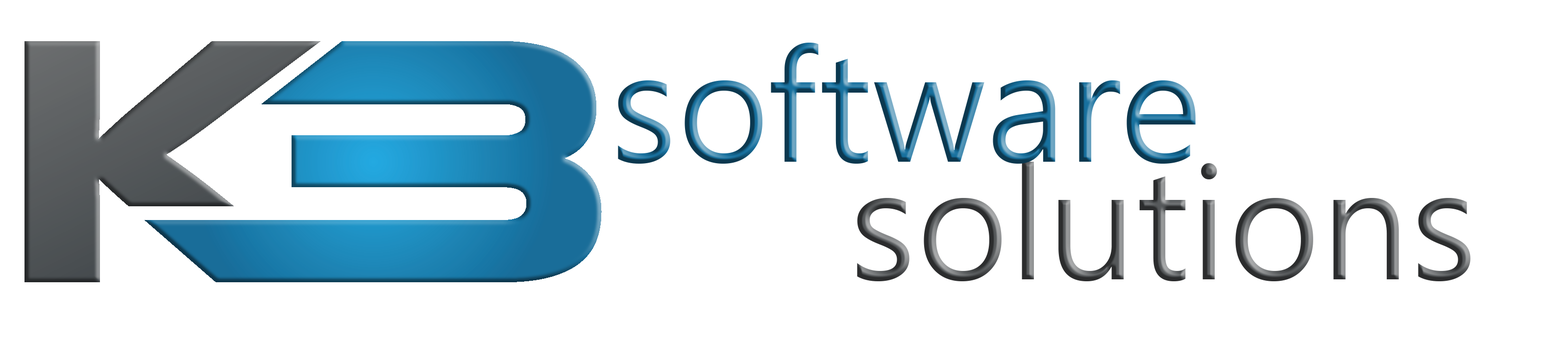
<style>
.page{position:relative;width:1568px;height:343px;background:#ffffff}
.page>*{position:absolute;margin:0}
.t1{font:147px "MicrosoftJhengHeiUIRegular"}
</style>
<div class="page">
<p class="t1" style="left:618px;top:43px;width:578px;height:121px">software</p>
<p class="t1" style="left:857px;top:162px;width:613px;height:119px">solutions</p>
</div>
